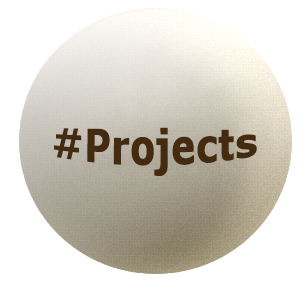
<style>
.page{position:relative;width:306px;height:290px;background:#ffffff}
.page>*{position:absolute;margin:0}
.t1{font:37.5px "Verdana-Bold";color:#442b10}
</style>
<div class="page">
<p class="t1" style="left:54px;top:127px;width:203px;height:49px">#Projects</p>
</div>
